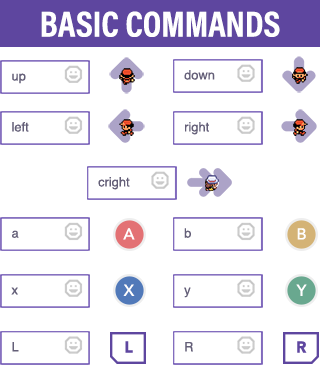
<style>
.page{position:relative;width:320px;height:381px;background:#ffffff}
.page>*{position:absolute;margin:0}
.t1{font:36.3px "AcuminProCond-Bold";color:#ffffff;text-transform:uppercase}
.t2{font:12.9px "Helvetica";color:#645f78}
.t3{font:15.8px "Avenir-Medium";color:#ffffff}
.t4{font:15.8px "Avenir-Black";color:#5e469f}
</style>
<div class="page">
<p class="t1" style="left:41px;top:11px;width:239px;height:26px">Basic Commands</p>
<p class="t2" style="left:12px;top:73px;width:14px;height:11px">up</p>
<p class="t2" style="left:184px;top:70px;width:31px;height:10px">down</p>
<p class="t2" style="left:12px;top:122px;width:17px;height:10px">left</p>
<p class="t2" style="left:185px;top:122px;width:24px;height:13px">right</p>
<p class="t2" style="left:98px;top:177px;width:32px;height:13px">cright</p>
<p class="t2" style="left:12px;top:230px;width:7px;height:8px">a</p>
<p class="t3" style="left:123px;top:228px;width:12px;height:12px">A</p>
<p class="t2" style="left:184px;top:228px;width:7px;height:10px">b</p>
<p class="t3" style="left:297px;top:228px;width:9px;height:12px">B</p>
<p class="t2" style="left:11px;top:287px;width:7px;height:8px">x</p>
<p class="t3" style="left:123px;top:284px;width:12px;height:12px">X</p>
<p class="t2" style="left:184px;top:287px;width:7px;height:11px">y</p>
<p class="t3" style="left:296px;top:284px;width:11px;height:12px">Y</p>
<p class="t2" style="left:12px;top:342px;width:7px;height:10px">L</p>
<p class="t4" style="left:125px;top:341px;width:8px;height:12px">L</p>
<p class="t2" style="left:185px;top:342px;width:8px;height:10px">R</p>
<p class="t4" style="left:297px;top:341px;width:10px;height:12px">R</p>
</div>
